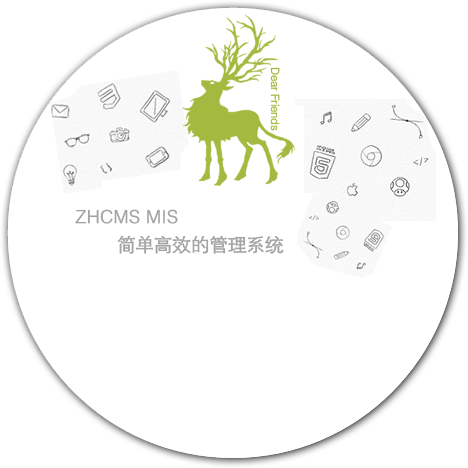
<style>
.page{position:relative;width:468px;height:468px;background:#ffffff}
.page>*{position:absolute;margin:0}
.t1{font:11px "FZZDXJW--GB1-0";letter-spacing:-0.025em;color:#a2ba40;font-weight:bold}
.t2{font:18px "FZZDXJW--GB1-0";color:#a5a4a4;font-weight:bold}
</style>
<div class="page">
<p class="t1" style="left:270px;top:67px;width:10px;height:64px">Dear Friends</p>
<p class="t2" style="left:75px;top:209px;width:103px;height:15px">ZHCMS MIS</p>
<p class="t2" style="left:117px;top:235px;width:167px;height:19px">简单高效的管理系统</p>
</div>
